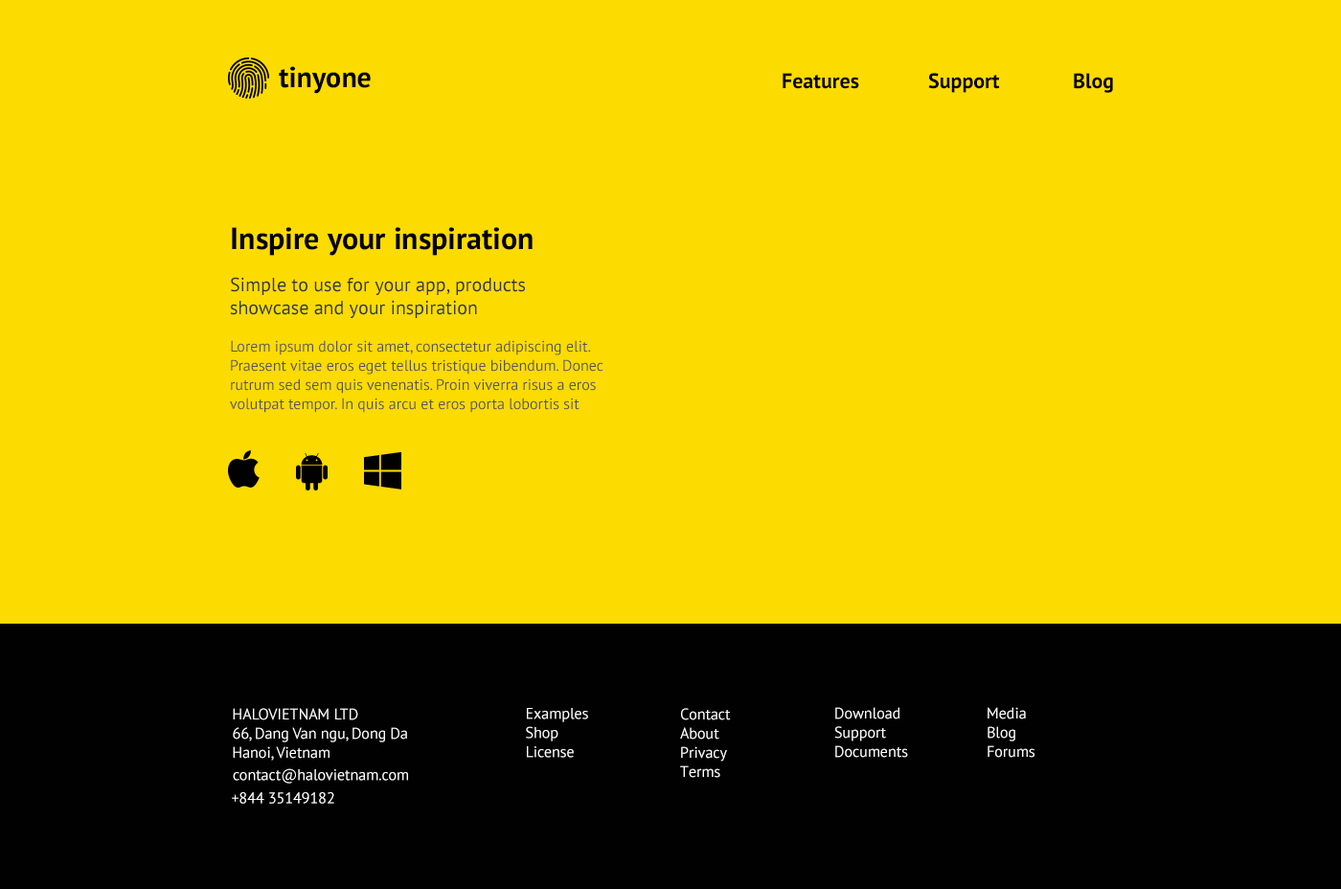
<style>
.page{position:relative;width:1341px;height:889px;background:#fcdb00}
.page>*{position:absolute;margin:0}
.t1{font:28.7px "PTSans-Bold";color:#010101}
.t2{font:21.1px "PTSans-Bold";color:#010101}
.t3{font:30.7px "PTSans-Bold";color:#010101}
.t4{font:19.2px/23px "PTSans-Regular";color:#313841}
.t5{font:15.3px/19.2px "PTSans-Regular";color:#555555}
.t6{font:15.3px/19.2px "PTSans-Regular";color:#ffffff}
.t7{font:15.3px "PTSans-Regular";color:#ffffff}
</style>
<div class="page">
<p class="t1" style="left:279px;top:66px;width:92px;height:28px">tinyone</p>
<p class="t2" style="left:783px;top:73px;width:76px;height:16px">Features</p>
<p class="t2" style="left:928px;top:73px;width:72px;height:20px">Support</p>
<p class="t2" style="left:1074px;top:73px;width:39px;height:20px">Blog</p>
<p class="t3" style="left:232px;top:227px;width:301px;height:29px">Inspire your inspiration</p>
<p class="t4" style="left:230px;top:277px;width:295px;height:41px">Simple to use for your app, products showcase and your inspiration</p>
<p class="t5" style="left:230px;top:340px;width:374px;height:73px">Lorem ipsum dolor sit amet, consectetur adipiscing elit. Praesent vitae eros eget tellus tristique bibendum. Donec rutrum sed sem quis venenatis. Proin viverra risus a eros volutpat tempor. In quis arcu et eros porta lobortis sit</p>
<p class="t6" style="left:233px;top:708px;width:174px;height:53px">HALOVIETNAM LTD<br>66, Dang Van ngu, Dong Da<br>Hanoi, Vietnam</p>
<p class="t6" style="left:526px;top:708px;width:62px;height:50px">Examples<br>Shop<br>License</p>
<p class="t6" style="left:680px;top:708px;width:51px;height:70px">Contact<br>About<br>Privacy<br>Terms</p>
<p class="t6" style="left:834px;top:707px;width:74px;height:51px">Download<br>Support<br>Documents</p>
<p class="t6" style="left:988px;top:707px;width:47px;height:51px">Media<br>Blog<br>Forums</p>
<p class="t7" style="left:233px;top:768px;width:175px;height:16px">contact@halovietnam.com</p>
<p class="t7" style="left:232px;top:792px;width:102px;height:12px">+844 35149182</p>
</div>
